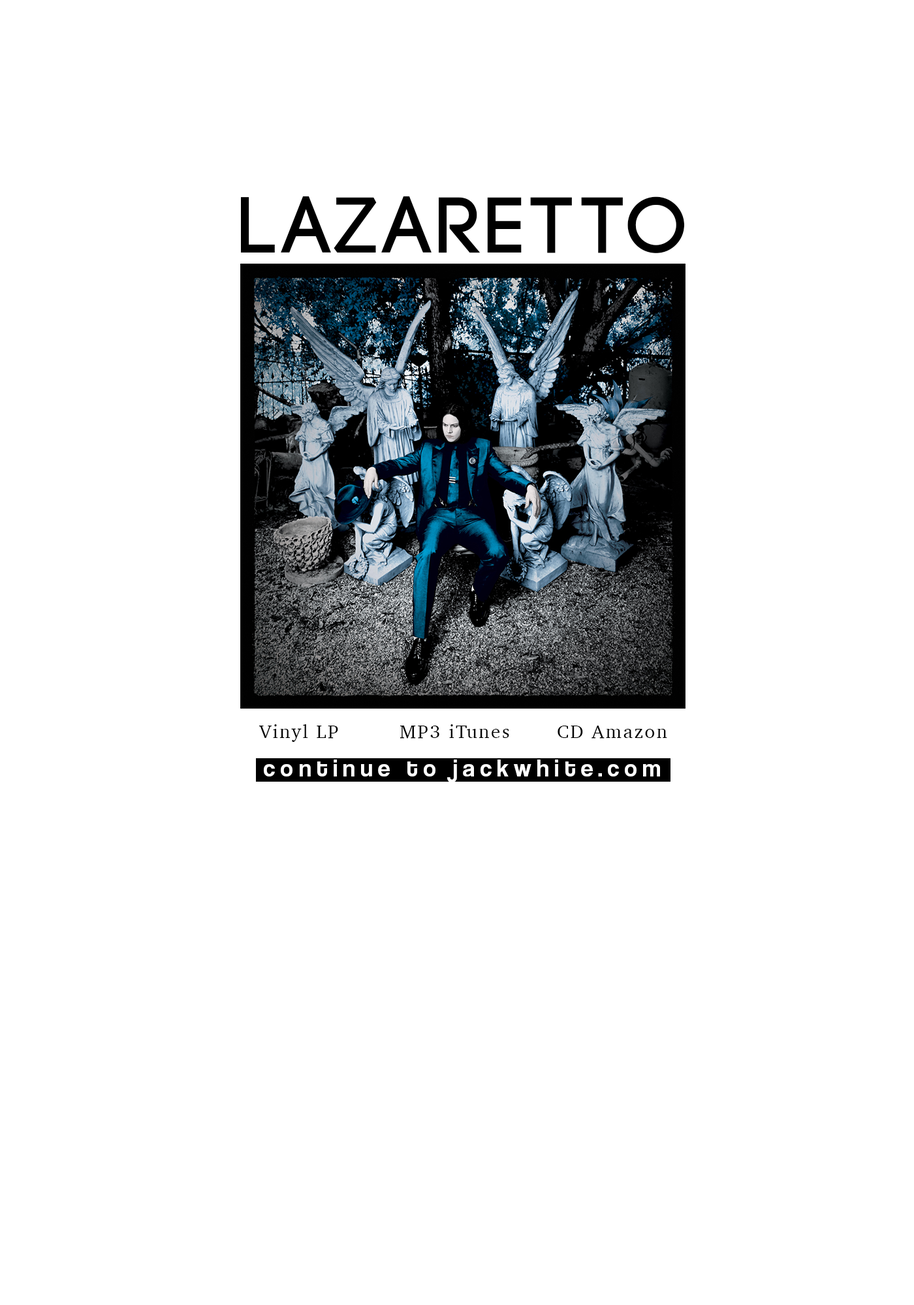
<style>
.page{position:relative;width:914px;height:1305px;background:#ffffff}
.page>*{position:absolute;margin:0}
.t1{font:78.9px "Code-Bold";letter-spacing:0.08em;color:#000000}
.t2{font:19px "Charter-Roman";letter-spacing:0.08em;color:#000000}
.t3{font:24.5px "CoolveticaRg-Regular";letter-spacing:0.22em;color:#ffffff}
</style>
<div class="page">
<p class="t1" style="left:241px;top:196px;width:444px;height:57px">LAZARETTO</p>
<p class="t2" style="left:258px;top:724px;width:80px;height:18px">Vinyl LP</p>
<p class="t2" style="left:399px;top:724px;width:110px;height:15px">MP3 iTunes</p>
<p class="t2" style="left:557px;top:726px;width:110px;height:13px">CD Amazon</p>
<p class="t3" style="left:264px;top:760px;width:396px;height:22px">continue to jackwhite.com</p>
</div>
